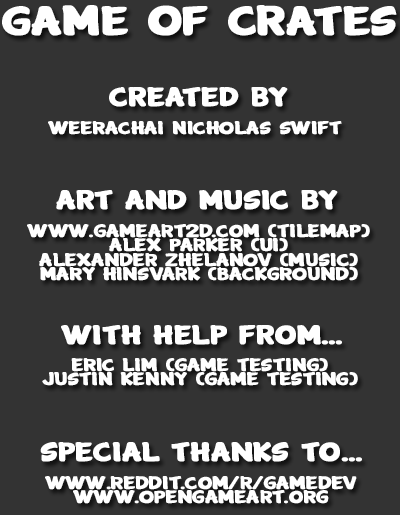
<style>
.page{position:relative;width:400px;height:515px;background:#333333}
.page>*{position:absolute;margin:0}
.t1{font:42px "Cartwheel";color:#ffffff;font-weight:bold;scale:1.33 1}
.t2{font:27px "Cartwheel";color:#ffffff;font-weight:bold;scale:1.33 1}
.t3{font:18px "Cartwheel";color:#ffffff;font-weight:bold;scale:1.33 1}
</style>
<div class="page">
<p class="t1" style="left:2px;top:5px;width:395px;height:31px">Game of Crates</p>
<p class="t2" style="left:109px;top:87px;width:179px;height:20px">Created by</p>
<p class="t3" style="left:48px;top:121px;width:294px;height:14px">Weerachai Nicholas Swift</p>
<p class="t2" style="left:56px;top:190px;width:282px;height:20px">Art and Music by</p>
<p class="t3" style="left:27px;top:224px;width:343px;height:57px;text-align:center">www.gameart2d.com (Tilemap)<br>Alex Parker (UI)<br>Alexander Zhelanov (Music)<br>Mary Hinsvark (Background)</p>
<p class="t2" style="left:61px;top:325px;width:281px;height:20px">With help from...</p>
<p class="t3" style="left:42px;top:358px;width:316px;height:28px;text-align:center">Eric Lim (Game Testing)<br>Justin Kenny (Game Testing)</p>
<p class="t2" style="left:40px;top:442px;width:322px;height:20px">Special Thanks to...</p>
<p class="t3" style="left:45px;top:476px;width:312px;height:28px;text-align:center">www.reddit.com/r/gamedev<br>www.opengameart.org</p>
</div>
